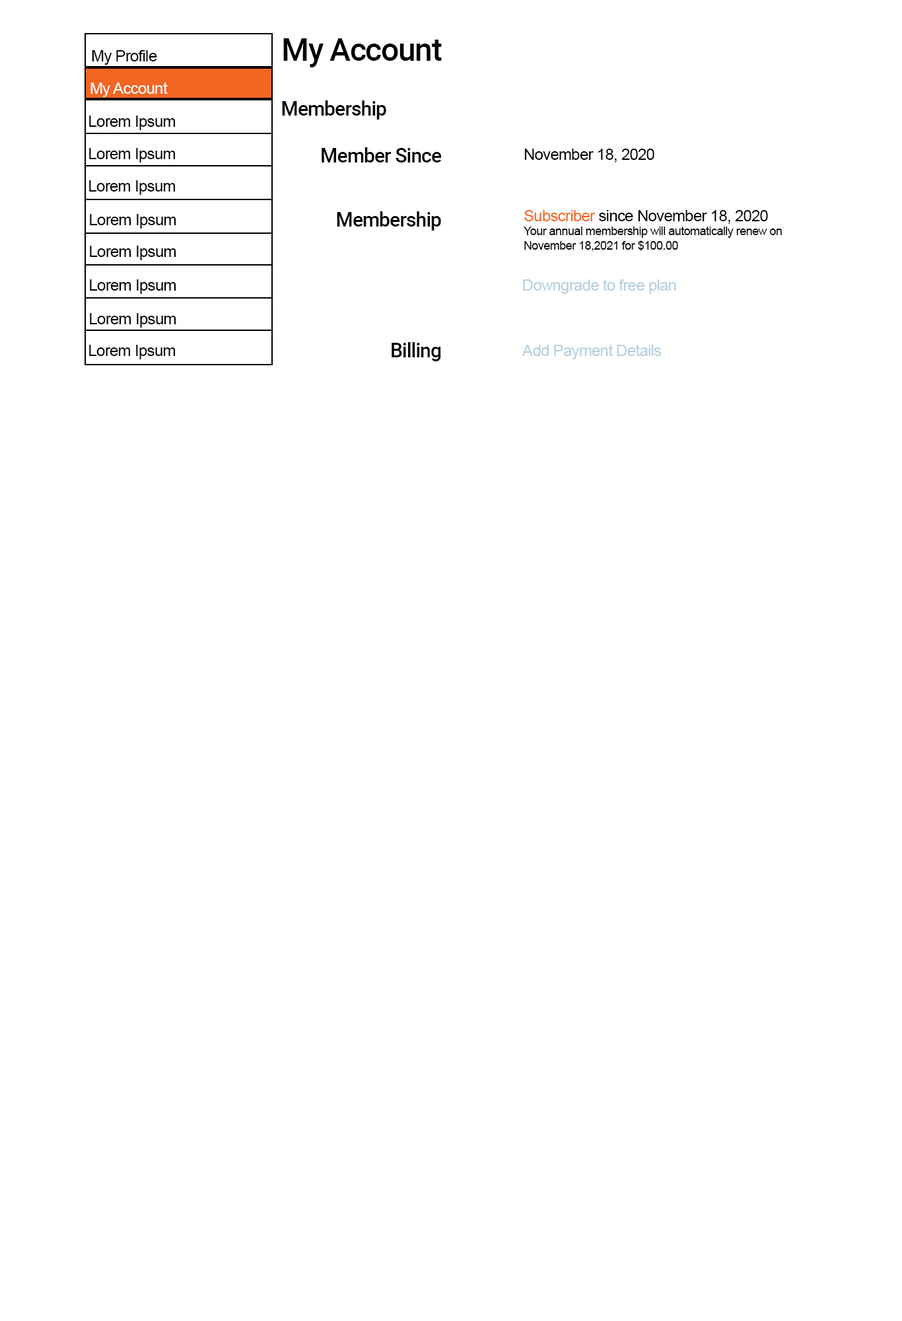
<style>
.page{position:relative;width:902px;height:1321px;background:#ffffff}
.page>*{position:absolute;margin:0}
.t1{font:31.7px "Roboto-Medium";letter-spacing:-0.03em;color:#000000}
.t2{font:15.9px "ArialMT";letter-spacing:-0.03em;color:#000000}
.t3{font:15.9px "ArialMT";letter-spacing:-0.03em;color:#ffffff}
.t4{font:19.8px "Roboto-Medium";letter-spacing:-0.03em;color:#000000}
.t5{font:11.9px "ArialMT";letter-spacing:-0.03em;color:#000000}
.t6{font:15.9px "ArialMT";letter-spacing:-0.03em;color:#f26522}
.t7{font:15.9px "ArialMT";letter-spacing:-0.03em;color:#b5cfde}
</style>
<div class="page">
<p class="t1" style="left:283px;top:38px;width:159px;height:29px">My Account</p>
<p class="t2" style="left:92px;top:50px;width:65px;height:15px">My Profile</p>
<p class="t3" style="left:91px;top:82px;width:77px;height:15px">My Account</p>
<p class="t4" style="left:282px;top:100px;width:104px;height:20px">Membership</p>
<p class="t2" style="left:89px;top:116px;width:87px;height:14px">Lorem Ipsum</p>
<p class="t2" style="left:89px;top:148px;width:87px;height:15px">Lorem Ipsum</p>
<p class="t4" style="left:322px;top:147px;width:120px;height:16px">Member Since</p>
<p class="t2" style="left:525px;top:149px;width:130px;height:14px">November 18, 2020</p>
<p class="t2" style="left:89px;top:180px;width:87px;height:15px">Lorem Ipsum</p>
<p class="t2" style="left:90px;top:214px;width:86px;height:15px">Lorem Ipsum</p>
<p class="t4" style="left:337px;top:211px;width:104px;height:20px">Membership</p>
<p class="t5" style="left:524px;top:210px;width:258px;height:41px"><span class="t6">Subscriber</span><span class="t2"> since November 18, 2020<br></span>Your annual membership will automatically renew on <br>November 18,2021 for $100.00</p>
<p class="t2" style="left:90px;top:246px;width:86px;height:14px">Lorem Ipsum</p>
<p class="t2" style="left:90px;top:279px;width:86px;height:15px">Lorem Ipsum</p>
<p class="t7" style="left:523px;top:279px;width:154px;height:15px">Downgrade to free plan</p>
<p class="t2" style="left:90px;top:313px;width:86px;height:15px">Lorem Ipsum</p>
<p class="t2" style="left:89px;top:345px;width:87px;height:14px">Lorem Ipsum</p>
<p class="t4" style="left:392px;top:342px;width:49px;height:19px">Billing</p>
<p class="t7" style="left:523px;top:344px;width:139px;height:15px">Add Payment Details</p>
</div>
